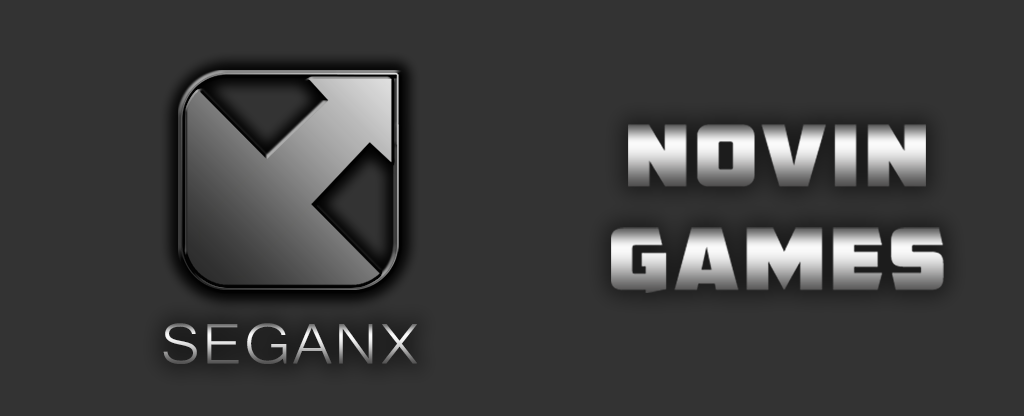
<style>
.page{position:relative;width:1024px;height:416px;background:#333333}
.page>*{position:absolute;margin:0}
.t1{font:84.3px "AMCAPEternal";font-weight:bold;scale:1.07 1}
.t2{font:72.8px "Microsoft-Yi-Baiti";font-weight:bold;scale:1.08 1}
</style>
<div class="page">
<p class="t1" style="left:628px;top:124px;width:298px;height:63px">NOVIN</p>
<p class="t1" style="left:611px;top:227px;width:333px;height:66px">GAMES</p>
<p class="t2" style="left:163px;top:323px;width:254px;height:41px">SEGANX</p>
</div>
